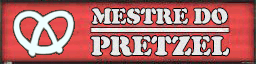
<style>
.page{position:relative;width:256px;height:64px}
.page>*{position:absolute;margin:0}
.t1{font:22px "CooperBlackStencil";color:#e7e7e7;text-transform:uppercase}
.t2{font:27.5px "CooperBlackStencil";color:#e7e7e7;text-transform:uppercase}
</style>
<div class="page">
<p class="t1" style="left:92px;top:8px;width:136px;height:16px">mestre do</p>
<p class="t2" style="left:91px;top:36px;width:138px;height:20px">pretzel</p>
</div>
